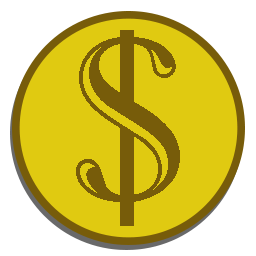
<style>
.page{position:relative;width:256px;height:256px;background:#e0ca11}
.page>*{position:absolute;margin:0}
.t1{font:241.7px "ImprintMT-Shadow";color:#775c0a}
</style>
<div class="page">
<p class="t1" style="left:76px;top:30px;width:104px;height:196px">$</p>
</div>
